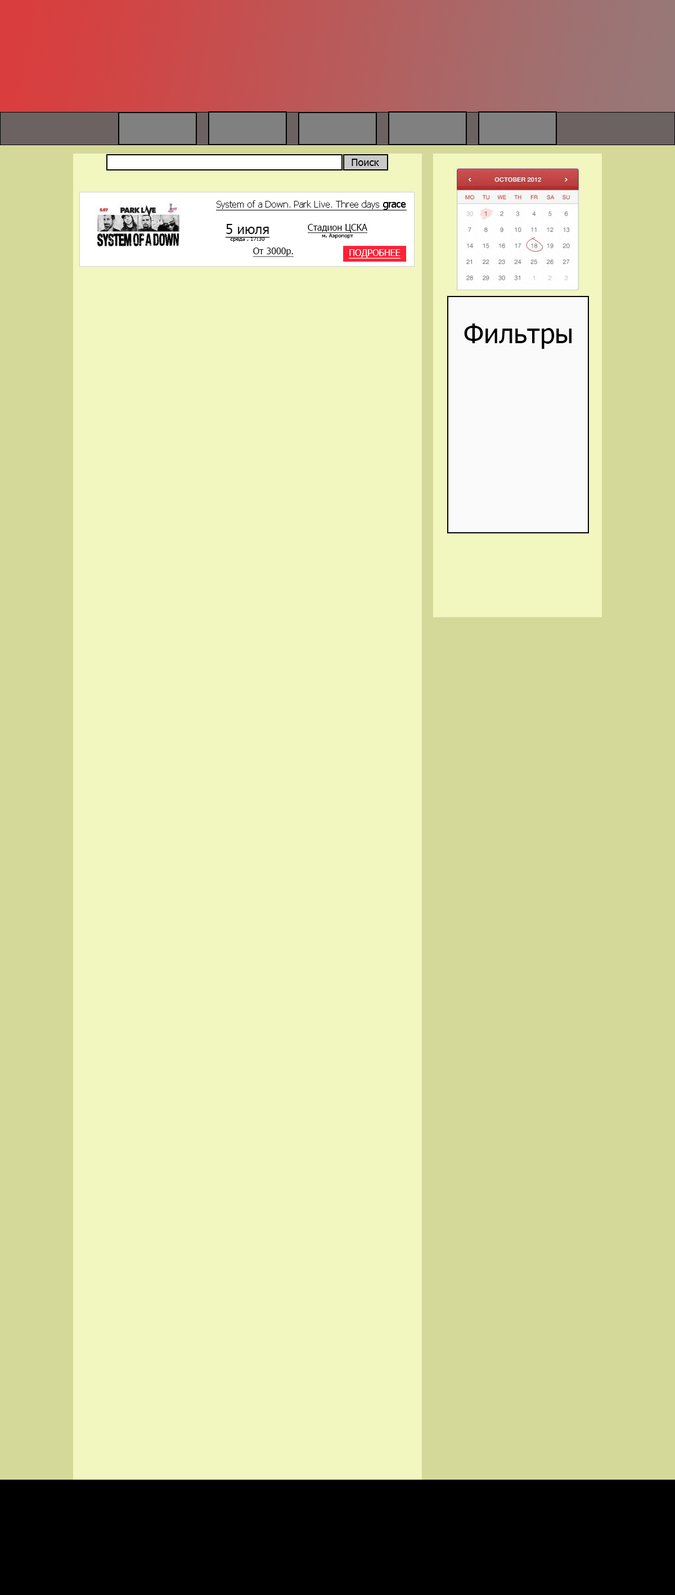
<style>
.page{position:relative;width:675px;height:1595px;background:#f2f6bf}
.page>*{position:absolute;margin:0}
.t1{font:10.1px "Tahoma";color:#000000}
.t2{font:9px "Tahoma";color:#000000;text-decoration:underline}
.t3{font:10.1px "Tahoma";color:#000000;text-decoration:underline}
.t4{font:5.6px "Tahoma";color:#000000}
.t5{font:13.5px "Tahoma";color:#000000;text-decoration:underline}
.t6{font:9px "Tahoma";color:#ffffff;text-decoration:underline}
.t7{font:27px "Tahoma";color:#000000}
</style>
<div class="page">
<p class="t1" style="left:352px;top:159px;width:27px;height:7px">Поиск</p>
<p class="t2" style="left:216px;top:200px;width:191px;height:10px">System of a Down. Park Live. Three days <span class="t3">grace</span></p>
<p class="t4" style="left:225px;top:224px;width:45px;height:18px;text-align:center"><span class="t5">5 июля<br></span>среда , 17:30</p>
<p class="t2" style="left:308px;top:224px;width:59px;height:14px;text-align:center">Стадион ЦСКА<br><span class="t4">м. Аэропорт</span></p>
<p class="t2" style="left:253px;top:248px;width:41px;height:9px">От 3000р.</p>
<p class="t6" style="left:349px;top:249px;width:51px;height:10px">ПОДРОБНЕЕ</p>
<p class="t7" style="left:464px;top:323px;width:108px;height:26px">Фильтры</p>
</div>
